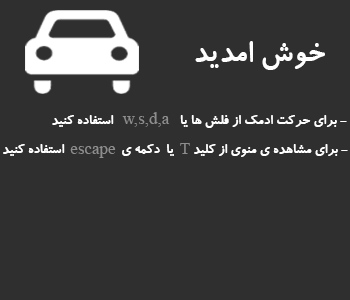
<style>
.page{position:relative;width:350px;height:300px;background:#2f2f2f}
.page>*{position:absolute;margin:0}
.t1{font:33px "BKoodakBold";color:#ffffff}
.t2{font:17px "TimesNewRomanPSMT";color:#8e8e8e}
.t3{font:15px "BKoodakBold";color:#ffffff}
</style>
<div class="page">
<p class="t1" style="left:195px;top:41px;width:130px;height:29px">خوش امدید</p>
<p class="t2" style="left:122px;top:112px;width:48px;height:15px">w,s,d,a</p>
<p class="t3" style="left:52px;top:115px;width:295px;height:13px">برای حرکت ادمک از فلش ها یا                     استفاده کنید -</p>
<p class="t3" style="left:3px;top:144px;width:345px;height:13px">برای مشاهده ی منوی از کلید      یا  دکمه ی                  استفاده کنید -</p>
<p class="t2" style="left:70px;top:146px;width:46px;height:12px">escape</p>
<p class="t2" style="left:180px;top:143px;width:10px;height:11px">T</p>
</div>
